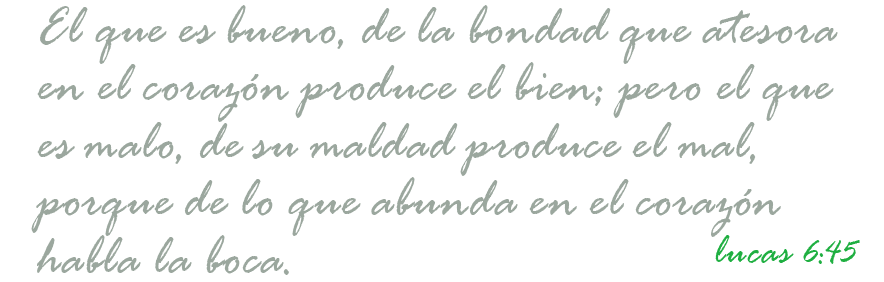
<style>
.page{position:relative;width:884px;height:282px;background:#ffffff}
.page>*{position:absolute;margin:0}
.t1{font:57.6px "RageItalic";color:#9ba79e;scale:0.92 1}
.t2{font:43.9px "RageItalic";color:#1faf41;scale:0.92 1}
.t3{font:36.6px "RageItalic";color:#1faf41;scale:0.92 1}
</style>
<div class="page">
<p class="t1" style="left:31px;top:5px;width:807px;height:270px">El que es bueno, de la bondad que atesora <br>en el corazón produce el bien; pero el que <br>es malo, de su maldad produce el mal, <br>porque de lo que abunda en el corazón <br>habla la boca.</p>
<p class="t2" style="left:715px;top:235px;width:145px;height:29px">lucas <span class="t3">6:45</span></p>
</div>
